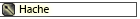
<style>
.page{position:relative;width:140px;height:19px;background:#ffffff}
.page>*{position:absolute;margin:0}
.t1{font:10.9px "LaoUI";color:#000000}
</style>
<div class="page">
<p class="t1" style="left:19px;top:5px;width:30px;height:8px">Hache</p>
</div>
